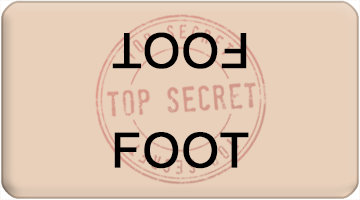
<style>
.page{position:relative;width:360px;height:200px;background:#e8d0bb}
.page>*{position:absolute;margin:0}
.t1{font:48px "ArialMT";color:#000000;font-weight:bold}
</style>
<div class="page">
<p class="t1" style="left:112px;top:32px;width:135px;height:37px;rotate:180deg">FOOT</p>
<p class="t1" style="left:114px;top:132px;width:135px;height:37px">FOOT</p>
</div>
